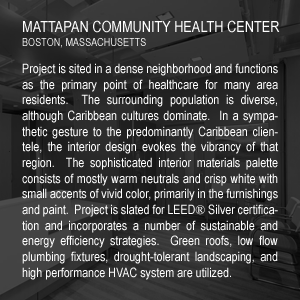
<style>
.page{position:relative;width:300px;height:300px}
.page>*{position:absolute;margin:0}
.t1{font:15.6px "ArialNarrow";color:#ffffff}
.t2{font:11.1px "ArialNarrow"}
.t3{font:13.1px "ArialNarrow";color:#ffffff}
.t4{font:13.1px "TimesNewRomanPSMT";color:#ffffff}
</style>
<div class="page">
<p class="t1" style="left:23px;top:20px;width:257px;height:13px">MATTAPAN COMMUNITY HEALTH CENTER</p>
<p class="t2" style="left:22px;top:38px;width:124px;height:10px">BOSTON, MASSACHUSETTS</p>
<p class="t3" style="left:22px;top:63px;width:257px;height:217px;text-align:justify">Project is sited in a dense neighborhood and functions as the primary point of healthcare for many area residents.  The surrounding population is diverse, although Caribbean cultures dominate.  In a sympathetic gesture to the predominantly Caribbean clientele, the interior design evokes the vibrancy of that region.  The sophisticated interior materials palette consists of mostly warm neutrals and crisp white with small accents of vivid color, primarily in the furnishings and paint.  Project is slated for LEED<span class="t4">®</span> Silver certification and incorporates a number of sustainable and energy efficiency strategies.  Green roofs, low flow plumbing fixtures, drought-tolerant landscaping, and high performance HVAC system are utilized.</p>
</div>
